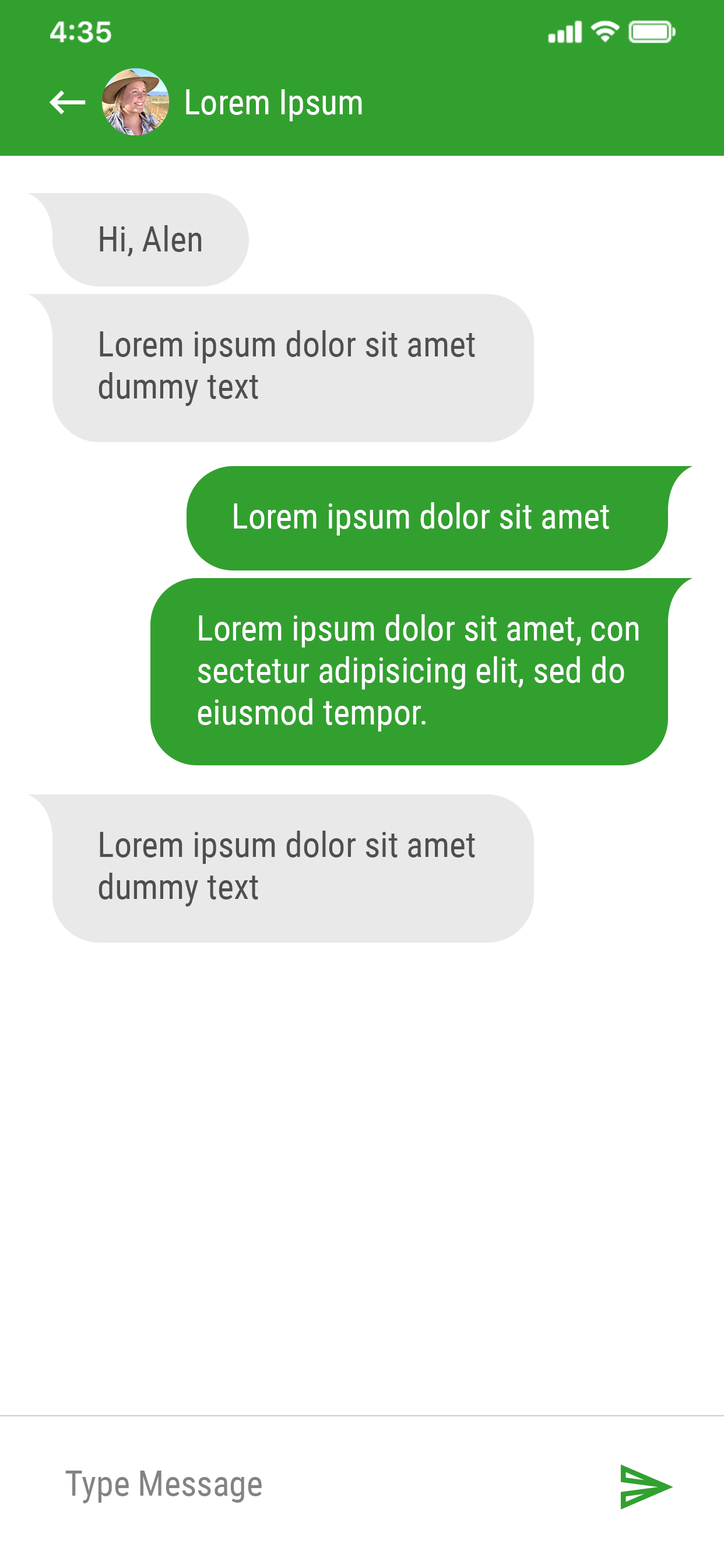
<style>
.page{position:relative;width:724px;height:1568px;background:#ffffff}
.page>*{position:absolute;margin:0}
.t1{font:35px "RobotoCondensed-Regular";color:#ffffff}
.t2{font:35px "RobotoCondensed-Regular";color:#4f4f4f}
.t3{font:35px "RobotoCondensed-Regular";color:#838383}
</style>
<div class="page">
<p class="t1" style="left:186px;top:89px;width:176px;height:32px">Lorem Ipsum</p>
<p class="t2" style="left:100px;top:225px;width:102px;height:32px">Hi, Alen</p>
<p class="t2" style="left:99px;top:330px;width:376px;height:76px">Lorem ipsum dolor sit amet <br>dummy text</p>
<p class="t1" style="left:234px;top:502px;width:376px;height:34px">Lorem ipsum dolor sit amet</p>
<p class="t1" style="left:198px;top:614px;width:441px;height:118px">Lorem ipsum dolor sit amet, con<br>sectetur adipisicing elit, sed do <br>eiusmod tempor.</p>
<p class="t2" style="left:99px;top:831px;width:376px;height:76px">Lorem ipsum dolor sit amet <br>dummy text</p>
<p class="t3" style="left:65px;top:1471px;width:197px;height:32px">Type Message</p>
</div>
